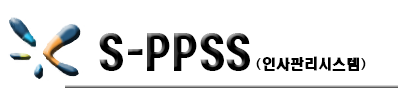
<style>
.page{position:relative;width:400px;height:100px;background:#ffffff}
.page>*{position:absolute;margin:0}
.t1{font:43.1px "HeadlineR-HM";color:#000000;scale:0.85 1}
.t2{font:14px "HeadlineR-HM";color:#000000}
</style>
<div class="page">
<p class="t1" style="left:99px;top:33px;width:151px;height:38px">S-PPSS</p>
<p class="t2" style="left:256px;top:56px;width:110px;height:15px">(인사관리시스템)</p>
</div>
